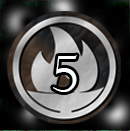
<style>
.page{position:relative;width:130px;height:131px}
.page>*{position:absolute;margin:0}
.t1{font:48px "FelixTitlingMT";color:#feffff}
</style>
<div class="page">
<p class="t1" style="left:53px;top:55px;width:24px;height:37px">5</p>
</div>
